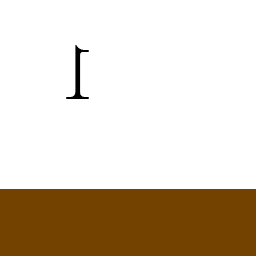
<style>
.page{position:relative;width:256px;height:256px;background:#ffffff}
.page>*{position:absolute;margin:0}
.t1{font:80px "SimSun";color:#000000}
</style>
<div class="page">
<p class="t1" style="left:66px;top:45px;width:23px;height:54px;rotate:180deg">1</p>
</div>
